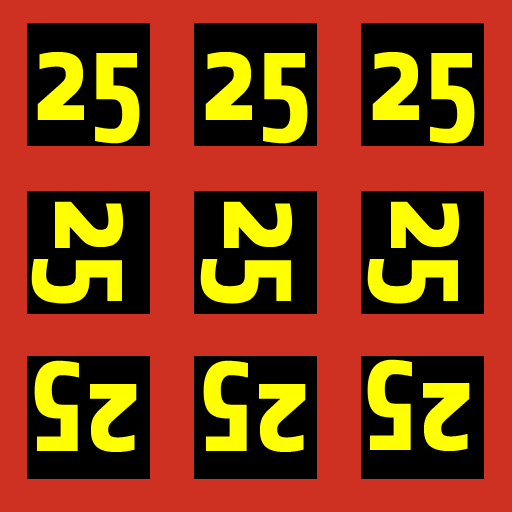
<style>
.page{position:relative;width:512px;height:512px;background:#ce3122}
.page>*{position:absolute;margin:0}
.t1{font:130px "Share-BoldOSF";color:#ffff00}
</style>
<div class="page">
<p class="t1" style="left:37px;top:51px;width:103px;height:93px">25</p>
<p class="t1" style="left:205px;top:51px;width:103px;height:93px">25</p>
<p class="t1" style="left:372px;top:51px;width:103px;height:93px">25</p>
<p class="t1" style="left:31px;top:201px;width:93px;height:103px;rotate:90deg">25</p>
<p class="t1" style="left:200px;top:201px;width:93px;height:103px;rotate:90deg">25</p>
<p class="t1" style="left:367px;top:201px;width:93px;height:103px;rotate:90deg">25</p>
<p class="t1" style="left:34px;top:360px;width:103px;height:93px;rotate:-180deg">25</p>
<p class="t1" style="left:203px;top:360px;width:103px;height:93px;rotate:-180deg">25</p>
<p class="t1" style="left:367px;top:359px;width:103px;height:93px;rotate:-180deg">25</p>
</div>
